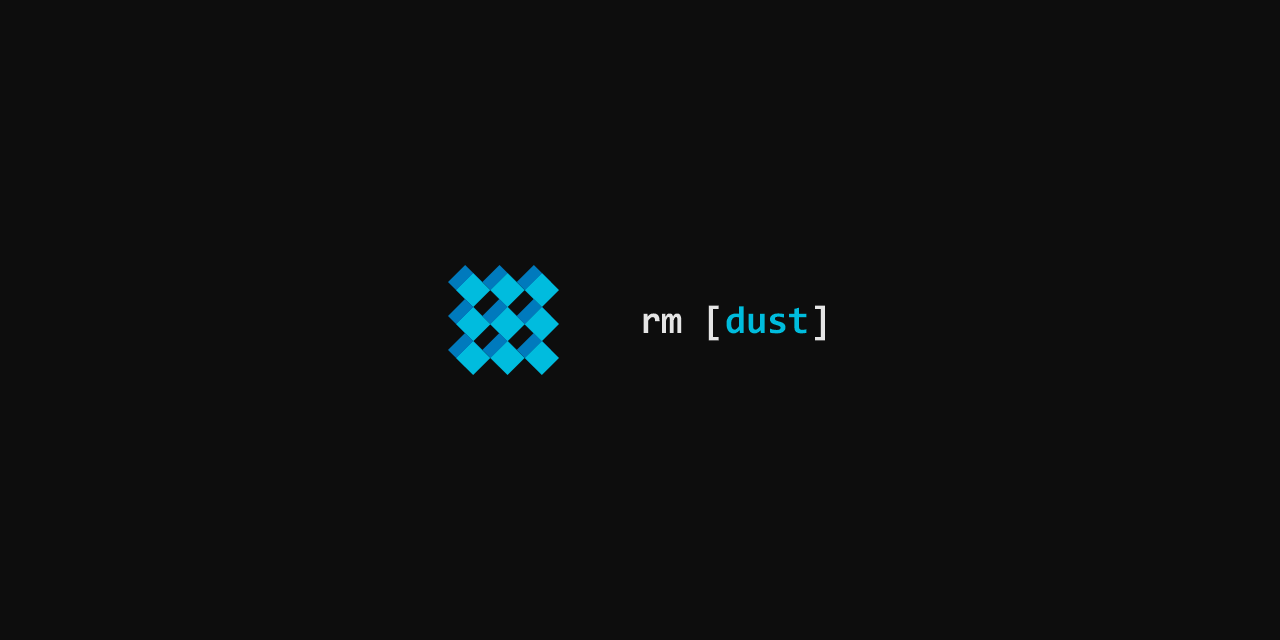
<style>
.page{position:relative;width:1280px;height:640px;background:#0d0d0d}
.page>*{position:absolute;margin:0}
.t1{font:38.9px "Consolas-Bold"}
</style>
<div class="page">
<p class="t1" style="left:643px;top:305px;width:182px;height:36px">rm [dust]</p>
</div>
